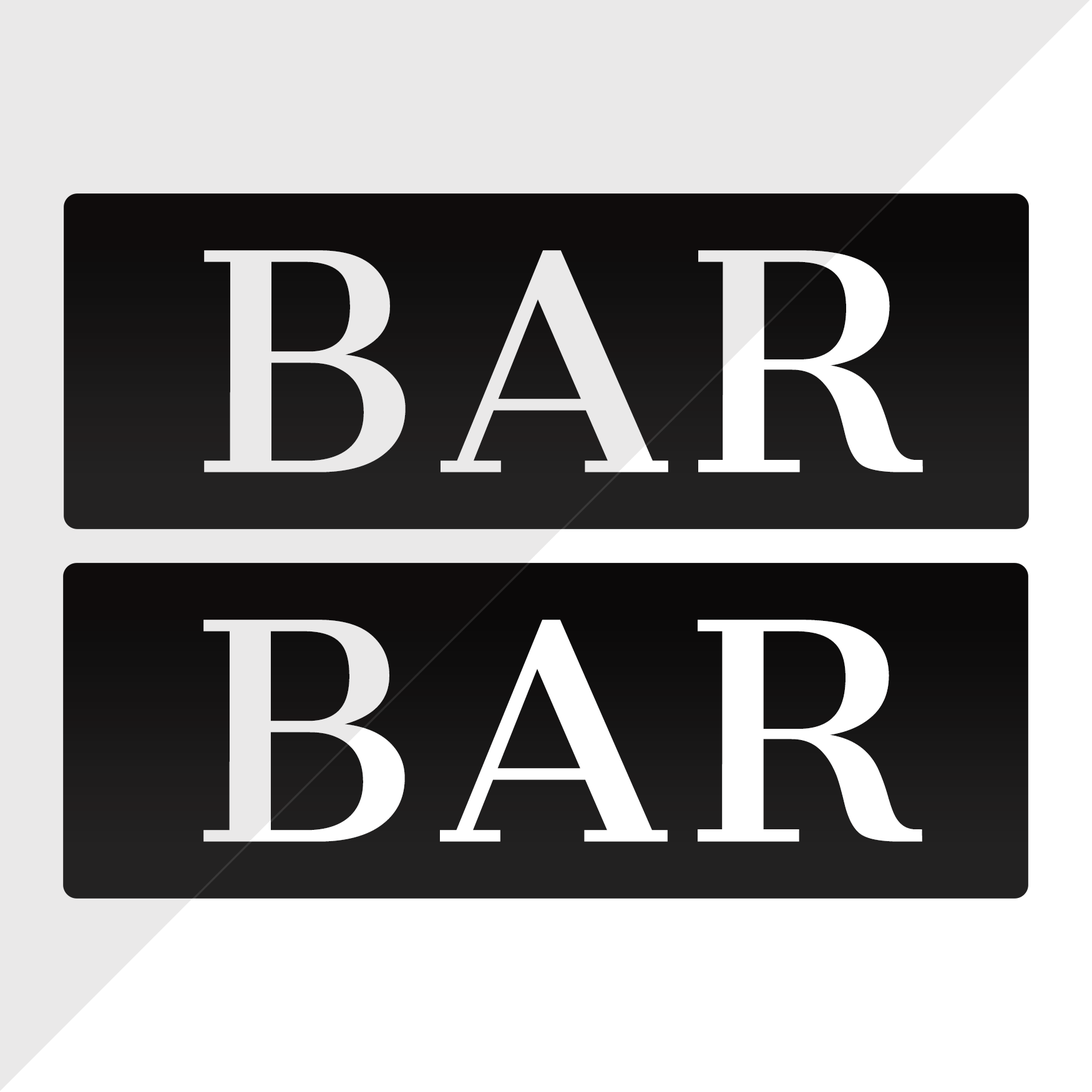
<style>
.page{position:relative;width:1092px;height:1092px;background:#ffffff}
.page>*{position:absolute;margin:0}
.t1{font:296.4px "CantataOne-Regular";letter-spacing:0.05em;color:#ffffff;scale:1.05 1}
</style>
<div class="page">
<p class="t1" style="left:204px;top:250px;width:719px;height:222px">BAR</p>
<p class="t1" style="left:203px;top:620px;width:719px;height:222px">BAR</p>
</div>
